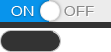
<style>
.page{position:relative;width:111px;height:52px;background:#ffffff}
.page>*{position:absolute;margin:0}
.t1{font:19px "HelveticaNeueLT-Extended";letter-spacing:0.04em;color:#ffffff;font-variant:small-caps}
.t2{font:19px "HelveticaNeueLT-Extended";letter-spacing:0.04em;color:#8b8b8b;font-variant:small-caps}
</style>
<div class="page">
<p class="t1" style="left:11px;top:6px;width:23px;height:10px">on</p>
<p class="t2" style="left:64px;top:6px;width:30px;height:10px">off</p>
</div>
